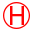
<style>
.page{position:relative;width:32px;height:32px;background:#ffffff}
.page>*{position:absolute;margin:0}
.t1{font:28px "MyriadPro-Regular";color:#ff0202}
</style>
<div class="page">
<p class="t1" style="left:10px;top:6px;width:14px;height:19px">H</p>
</div>
